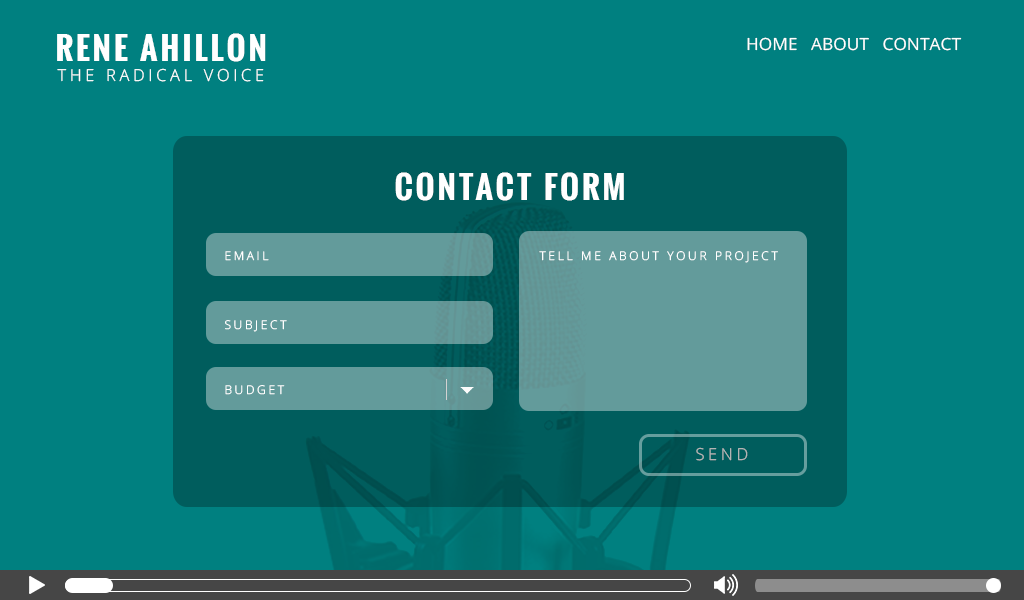
<style>
.page{position:relative;width:1024px;height:600px;background:#008080}
.page>*{position:absolute;margin:0}
.t1{font:31.4px "Oswald-Bold";letter-spacing:0.1em;color:#ffffff;text-transform:uppercase}
.t2{font:16.8px "OpenSans";color:#ffffff;text-transform:uppercase}
.t3{font:16.5px "OpenSans-Light";letter-spacing:0.22em;color:#ffffff;text-transform:uppercase}
.t4{font:12px "OpenSans-Light";letter-spacing:0.22em;color:#ffffff;text-transform:uppercase}
.t5{font:16.5px "OpenSans-Light";letter-spacing:0.22em;color:#bababa;text-transform:uppercase}
</style>
<div class="page">
<p class="t1" style="left:57px;top:33px;width:209px;height:29px">rene ahillon</p>
<p class="t2" style="left:747px;top:37px;width:215px;height:14px">hOME   ABOUT   CONTACT</p>
<p class="t3" style="left:57px;top:68px;width:207px;height:14px">THE RADICAL VOICE</p>
<p class="t1" style="left:395px;top:172px;width:229px;height:29px">Contact Form</p>
<p class="t4" style="left:225px;top:251px;width:44px;height:10px">Email</p>
<p class="t4" style="left:539px;top:251px;width:239px;height:12px">tell me about your project</p>
<p class="t4" style="left:225px;top:320px;width:62px;height:12px">Subject</p>
<p class="t4" style="left:225px;top:385px;width:60px;height:10px">Budget</p>
<p class="t5" style="left:696px;top:447px;width:52px;height:14px">send</p>
</div>
